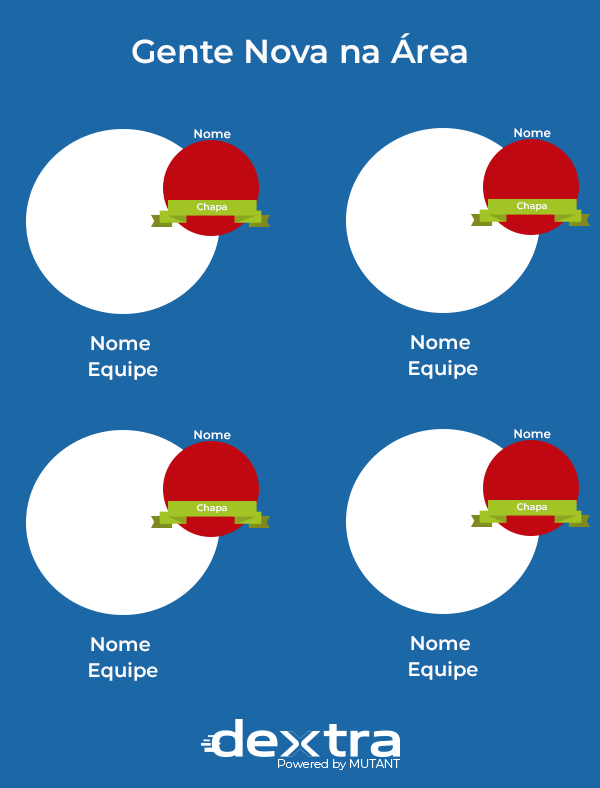
<style>
.page{position:relative;width:600px;height:788px;background:#1c68a6}
.page>*{position:absolute;margin:0}
.t1{font:33.2px "Montserrat-SemiBold";color:#fbfcfd}
.t2{font:12px "Montserrat-SemiBold";color:#ffffff}
.t3{font:9.4px "Montserrat-SemiBold";color:#ffffff}
.t4{font:19.5px/26px "Montserrat-SemiBold";color:#fbfcfd}
</style>
<div class="page">
<p class="t1" style="left:132px;top:33px;width:335px;height:31px">Gente Nova na Área</p>
<p class="t2" style="left:194px;top:129px;width:37px;height:10px">Nome</p>
<p class="t2" style="left:514px;top:128px;width:37px;height:10px">Nome</p>
<p class="t3" style="left:197px;top:203px;width:30px;height:9px">Chapa</p>
<p class="t3" style="left:517px;top:202px;width:30px;height:9px">Chapa</p>
<p class="t4" style="left:89px;top:336px;width:69px;height:44px;text-align:center">Nome <br>Equipe</p>
<p class="t4" style="left:409px;top:335px;width:69px;height:44px;text-align:center">Nome <br>Equipe</p>
<p class="t2" style="left:194px;top:430px;width:37px;height:10px">Nome</p>
<p class="t2" style="left:514px;top:429px;width:37px;height:10px">Nome</p>
<p class="t3" style="left:197px;top:504px;width:30px;height:9px">Chapa</p>
<p class="t3" style="left:517px;top:503px;width:30px;height:9px">Chapa</p>
<p class="t4" style="left:89px;top:637px;width:69px;height:44px;text-align:center">Nome <br>Equipe</p>
<p class="t4" style="left:409px;top:636px;width:69px;height:44px;text-align:center">Nome <br>Equipe</p>
</div>
